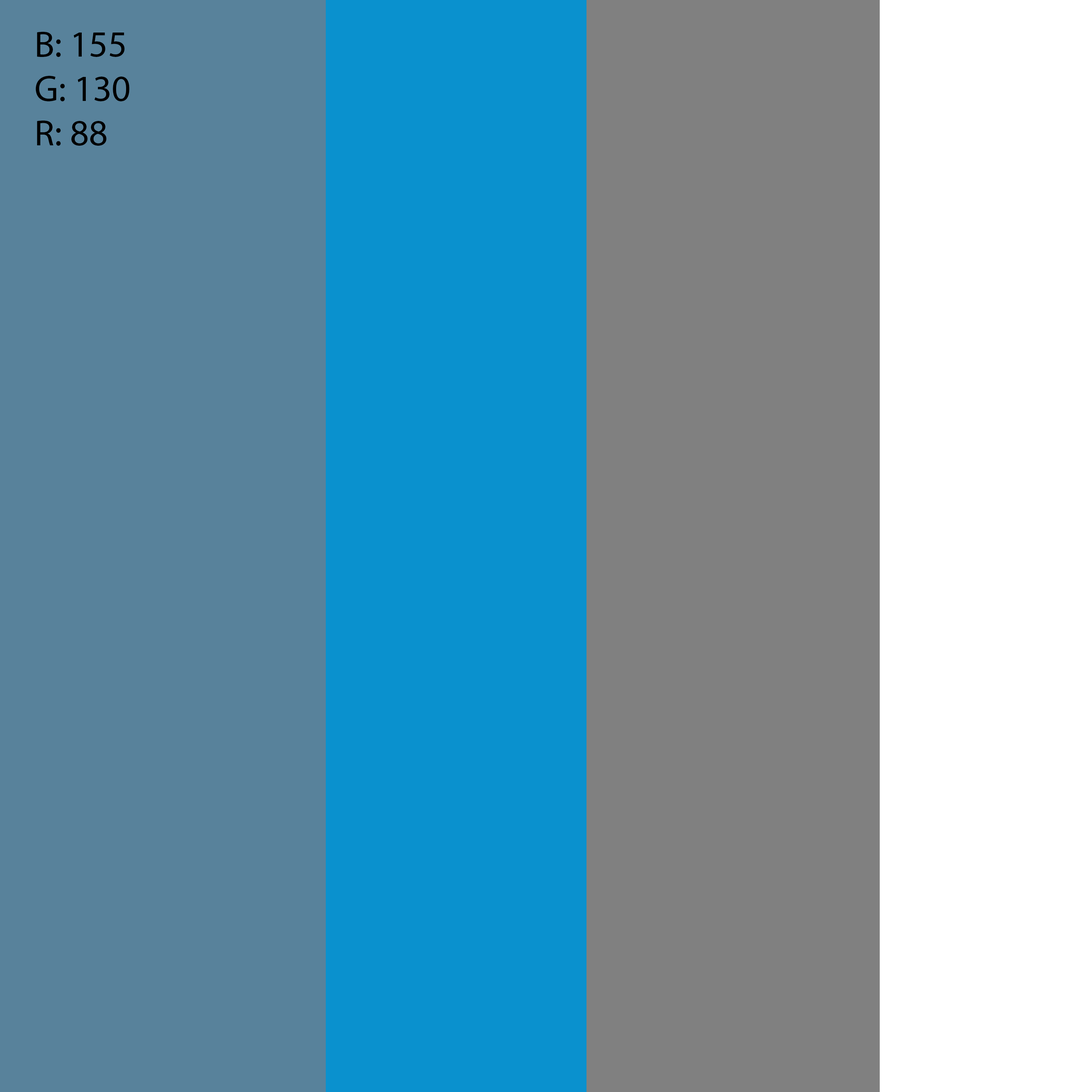
<style>
.page{position:relative;width:1092px;height:1092px;background:#58829b}
.page>*{position:absolute;margin:0}
.t1{font:37px "MyriadPro-Regular";color:#000000}
</style>
<div class="page">
<p class="t1" style="left:35px;top:32px;width:94px;height:114px">B: 155<br>G: 130<br>R: 88</p>
</div>
